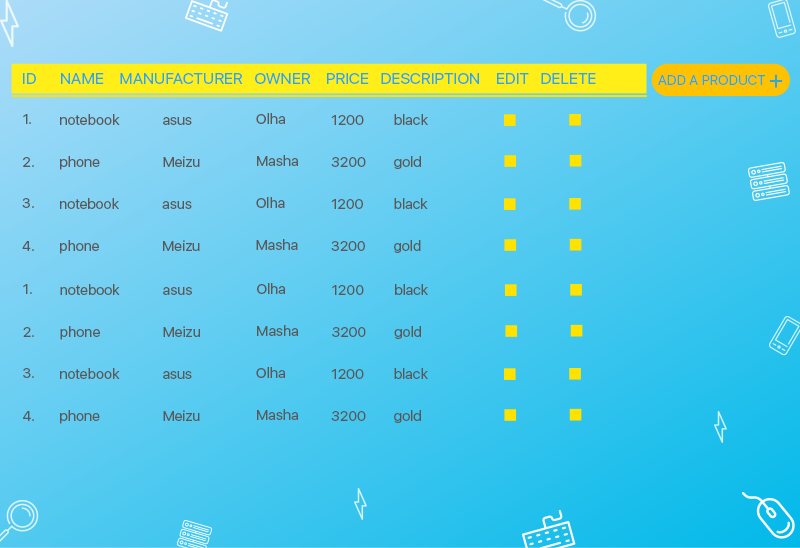
<style>
.page{position:relative;width:800px;height:548px}
.page>*{position:absolute;margin:0}
.t1{font:16.1px "SFUIDisplay-Regular";color:#2ea7e0;text-transform:uppercase}
.t2{font:14px "SFUIDisplay-Regular";color:#2ea7e0;text-transform:uppercase}
.t3{font:25.6px "SFUIDisplay-Regular";color:#2ea7e0;text-transform:uppercase}
.t4{font:14.6px "SFUIDisplay-Regular";color:#595857}
</style>
<div class="page">
<p class="t1" style="left:23px;top:73px;width:573px;height:11px">ID      Name    Manufacturer   Owner    Price   Description    Edit   Delete</p>
<p class="t2" style="left:658px;top:75px;width:108px;height:10px">Add a product</p>
<p class="t3" style="left:769px;top:74px;width:14px;height:14px">+</p>
<p class="t4" style="left:256px;top:113px;width:29px;height:11px">Olha</p>
<p class="t4" style="left:23px;top:114px;width:8px;height:10px">1.</p>
<p class="t4" style="left:60px;top:114px;width:60px;height:11px">notebook</p>
<p class="t4" style="left:163px;top:117px;width:29px;height:8px">asus</p>
<p class="t4" style="left:331px;top:115px;width:33px;height:10px">1200</p>
<p class="t4" style="left:394px;top:114px;width:34px;height:11px">black</p>
<p class="t4" style="left:23px;top:157px;width:11px;height:10px">2.</p>
<p class="t4" style="left:60px;top:156px;width:40px;height:14px">phone</p>
<p class="t4" style="left:163px;top:156px;width:37px;height:11px">Meizu</p>
<p class="t4" style="left:257px;top:155px;width:41px;height:11px">Masha</p>
<p class="t4" style="left:331px;top:157px;width:35px;height:10px">3200</p>
<p class="t4" style="left:394px;top:156px;width:27px;height:13px">gold</p>
<p class="t4" style="left:22px;top:198px;width:12px;height:10px">3.</p>
<p class="t4" style="left:60px;top:198px;width:59px;height:11px">notebook</p>
<p class="t4" style="left:256px;top:197px;width:29px;height:11px">Olha</p>
<p class="t4" style="left:394px;top:198px;width:34px;height:11px">black</p>
<p class="t4" style="left:162px;top:201px;width:30px;height:8px">asus</p>
<p class="t4" style="left:331px;top:199px;width:32px;height:10px">1200</p>
<p class="t4" style="left:22px;top:241px;width:12px;height:10px">4.</p>
<p class="t4" style="left:60px;top:240px;width:39px;height:14px">phone</p>
<p class="t4" style="left:163px;top:240px;width:37px;height:11px">Meizu</p>
<p class="t4" style="left:256px;top:239px;width:42px;height:11px">Masha</p>
<p class="t4" style="left:331px;top:241px;width:34px;height:10px">3200</p>
<p class="t4" style="left:394px;top:240px;width:27px;height:13px">gold</p>
<p class="t4" style="left:23px;top:284px;width:9px;height:10px">1.</p>
<p class="t4" style="left:60px;top:284px;width:60px;height:11px">notebook</p>
<p class="t4" style="left:163px;top:287px;width:29px;height:8px">asus</p>
<p class="t4" style="left:257px;top:283px;width:28px;height:11px">Olha</p>
<p class="t4" style="left:332px;top:285px;width:32px;height:10px">1200</p>
<p class="t4" style="left:395px;top:284px;width:33px;height:11px">black</p>
<p class="t4" style="left:23px;top:327px;width:11px;height:10px">2.</p>
<p class="t4" style="left:60px;top:326px;width:40px;height:14px">phone</p>
<p class="t4" style="left:163px;top:326px;width:37px;height:11px">Meizu</p>
<p class="t4" style="left:257px;top:325px;width:41px;height:11px">Masha</p>
<p class="t4" style="left:332px;top:327px;width:34px;height:10px">3200</p>
<p class="t4" style="left:394px;top:326px;width:27px;height:13px">gold</p>
<p class="t4" style="left:23px;top:368px;width:11px;height:10px">3.</p>
<p class="t4" style="left:60px;top:368px;width:60px;height:11px">notebook</p>
<p class="t4" style="left:163px;top:371px;width:29px;height:8px">asus</p>
<p class="t4" style="left:256px;top:367px;width:29px;height:11px">Olha</p>
<p class="t4" style="left:331px;top:369px;width:33px;height:10px">1200</p>
<p class="t4" style="left:394px;top:368px;width:34px;height:11px">black</p>
<p class="t4" style="left:23px;top:411px;width:11px;height:10px">4.</p>
<p class="t4" style="left:60px;top:410px;width:40px;height:14px">phone</p>
<p class="t4" style="left:163px;top:410px;width:37px;height:11px">Meizu</p>
<p class="t4" style="left:257px;top:409px;width:41px;height:11px">Masha</p>
<p class="t4" style="left:331px;top:411px;width:35px;height:10px">3200</p>
<p class="t4" style="left:394px;top:410px;width:27px;height:13px">gold</p>
</div>
